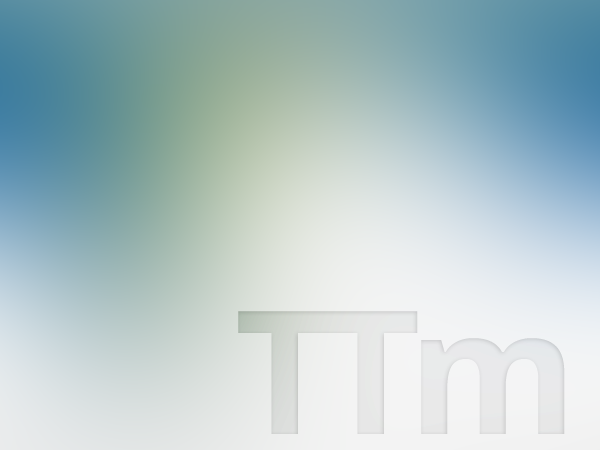
<style>
.page{position:relative;width:600px;height:450px}
.page>*{position:absolute;margin:0}
.t1{font:172px "OpenSans-Bold";letter-spacing:-0.075em;color:#e5e7e7}
</style>
<div class="page">
<p class="t1" style="left:238px;top:311px;width:327px;height:123px">TTm</p>
</div>
